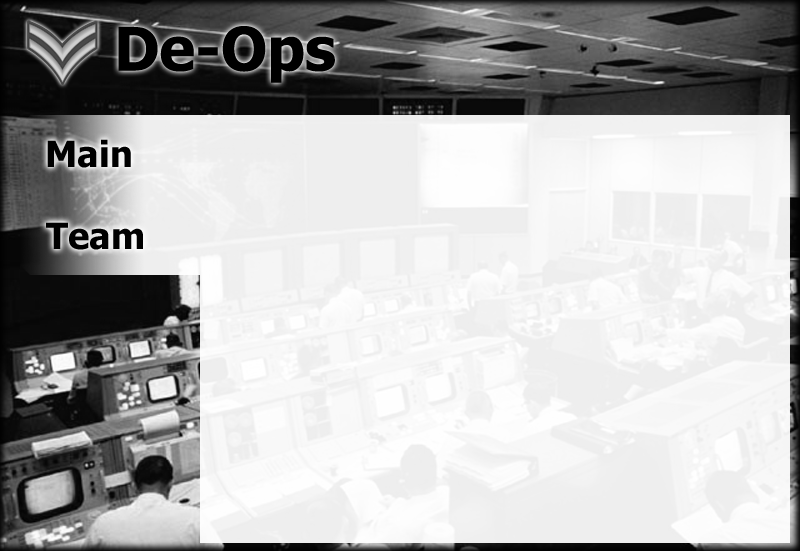
<style>
.page{position:relative;width:800px;height:551px}
.page>*{position:absolute;margin:0}
.t1{font:36px "Tahoma-Bold";color:#000000}
</style>
<div class="page">
<p class="t1" style="left:47px;top:139px;width:84px;height:29px">Main</p>
<p class="t1" style="left:46px;top:222px;width:97px;height:28px">Team</p>
</div>
